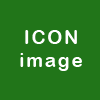
<style>
.page{position:relative;width:100px;height:100px;background:#217519}
.page>*{position:absolute;margin:0}
.t1{font:18.8px "ArialRoundedMTBold";letter-spacing:0.1em;color:#ffffff}
</style>
<div class="page">
<p class="t1" style="left:20px;top:30px;width:62px;height:41px;text-align:center">ICON<br>image</p>
</div>
